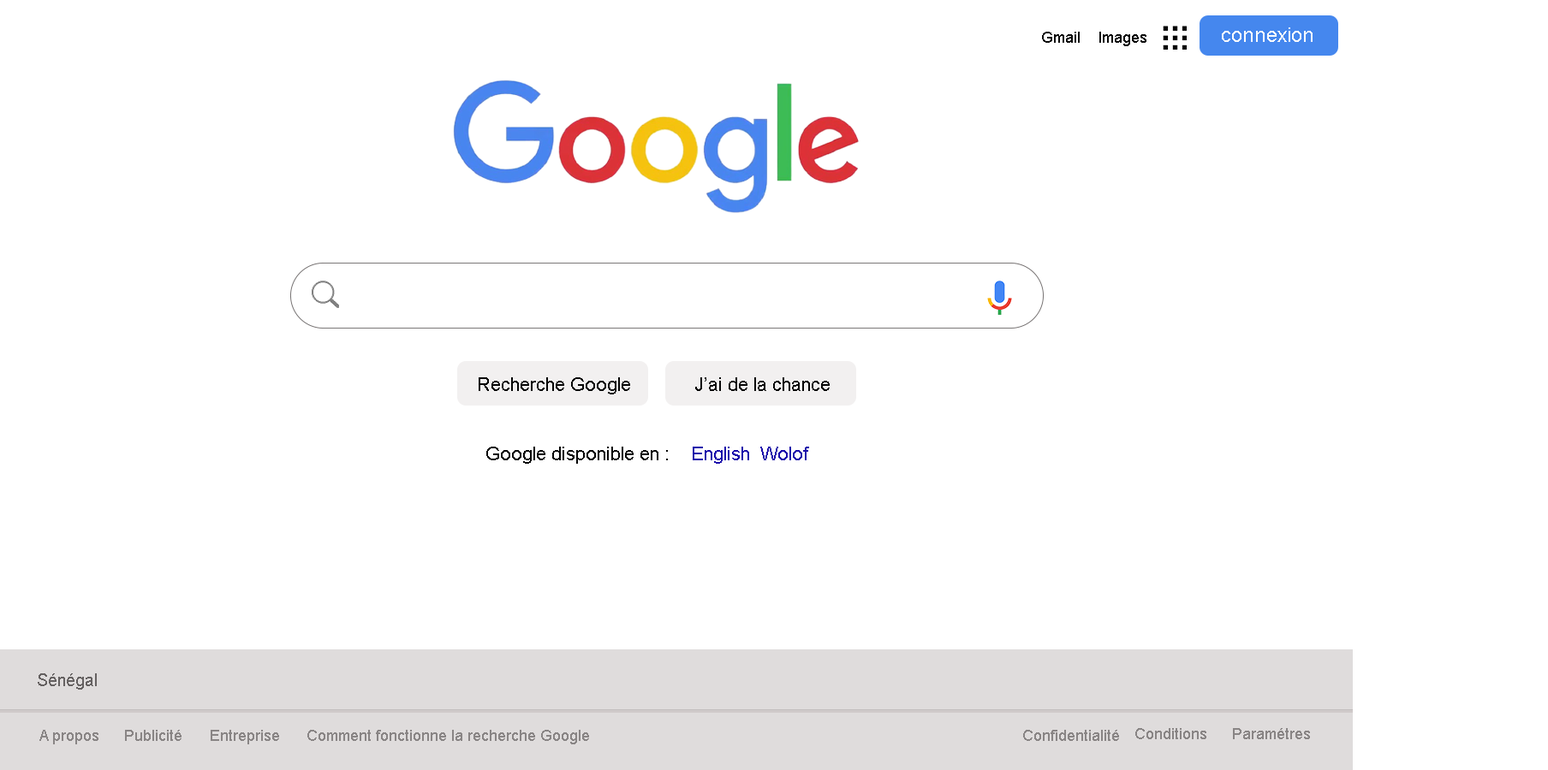
<style>
.page{position:relative;width:1548px;height:770px;background:#ffffff}
.page>*{position:absolute;margin:0}
.t1{font:20.5px "ArialMT";color:#fafbfd}
.t2{font:15.4px "ArialMT";color:#090909}
.t3{font:18.8px "ArialMT";color:#050505}
.t4{font:18.8px "ArialMT";color:#1a0dab}
.t5{font:17.1px "ArialMT";color:#656161}
.t6{font:15.4px "ArialMT";color:#898585}
</style>
<div class="page">
<p class="t1" style="left:1222px;top:27px;width:90px;height:15px">connexion</p>
<p class="t2" style="left:1042px;top:32px;width:37px;height:11px">Gmail</p>
<p class="t2" style="left:1099px;top:32px;width:47px;height:14px">Images</p>
<p class="t3" style="left:479px;top:378px;width:151px;height:17px">Recherche Google</p>
<p class="t3" style="left:695px;top:378px;width:135px;height:13px">J’ai de la chance</p>
<p class="t3" style="left:486px;top:447px;width:182px;height:17px">Google disponible en :</p>
<p class="t4" style="left:693px;top:447px;width:116px;height:17px">English  Wolof</p>
<p class="t5" style="left:38px;top:674px;width:59px;height:16px">Sénégal</p>
<p class="t6" style="left:39px;top:730px;width:59px;height:15px">A propos</p>
<p class="t6" style="left:125px;top:730px;width:56px;height:11px">Publicité</p>
<p class="t6" style="left:211px;top:730px;width:68px;height:15px">Entreprise</p>
<p class="t6" style="left:307px;top:730px;width:282px;height:15px">Comment fonctionne la recherche Google</p>
<p class="t6" style="left:1023px;top:730px;width:96px;height:11px">Confidentialité</p>
<p class="t6" style="left:1135px;top:728px;width:71px;height:12px">Conditions</p>
<p class="t6" style="left:1233px;top:728px;width:77px;height:12px">Paramétres</p>
</div>
